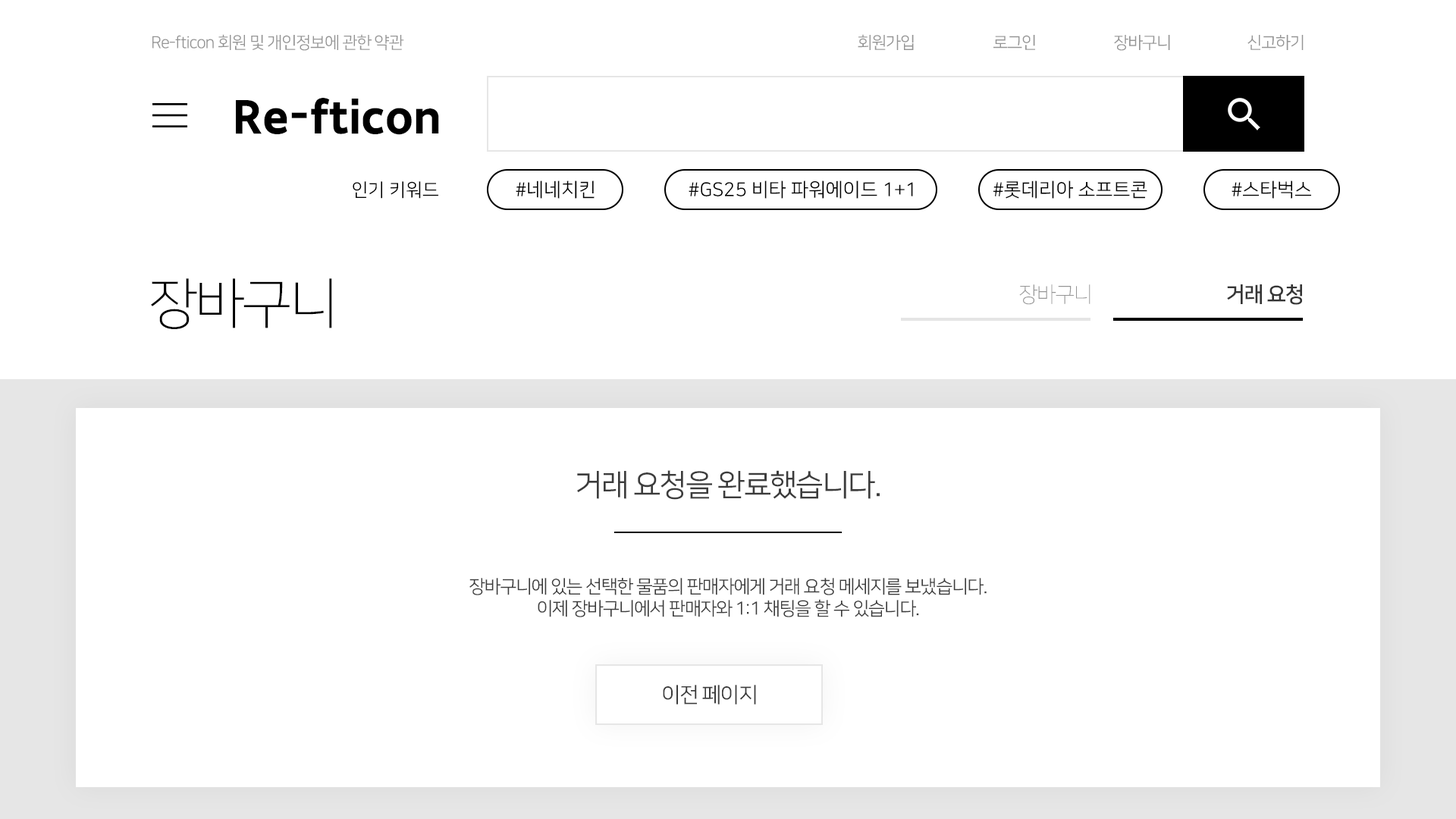
<style>
.page{position:relative;width:1456px;height:819px;background:#ffffff}
.page>*{position:absolute;margin:0}
.t1{font:16.7px "NanumSquareOTFR";letter-spacing:-0.05em;color:#959595}
.t2{font:45.5px "SDGothicNeoc-gExBd";color:#000000}
.t3{font:18.2px "NanumSquareOTFR";color:#000000}
.t4{font:19.1px "NanumSquareOTFR";color:#000000}
.t5{font:54.6px "NanumSquareOTFL";letter-spacing:-0.05em;color:#000000}
.t6{font:21.2px "NanumSquareOTFL";letter-spacing:-0.05em;color:#959595}
.t7{font:21.2px "NanumSquareOTFB";letter-spacing:-0.05em;color:#353535}
.t8{font:30.3px "NanumSquareOTFR";letter-spacing:-0.05em;color:#3c3c3c}
.t9{font:18.2px "NanumSquareOTFR";letter-spacing:-0.05em;color:#3c3c3c}
.t10{font:21.2px "NanumSquareOTFR";letter-spacing:-0.05em;color:#3c3c3c}
</style>
<div class="page">
<p class="t1" style="left:152px;top:34px;width:252px;height:17px">Re-fticon 회원 및 개인정보에 관한 약관</p>
<p class="t1" style="left:858px;top:34px;width:56px;height:16px">회원가입</p>
<p class="t1" style="left:993px;top:35px;width:42px;height:15px">로그인</p>
<p class="t1" style="left:1114px;top:35px;width:56px;height:16px">장바구니</p>
<p class="t1" style="left:1247px;top:35px;width:57px;height:15px">신고하기</p>
<p class="t2" style="left:236px;top:98px;width:203px;height:37px">Re-fticon</p>
<p class="t3" style="left:353px;top:181px;width:85px;height:18px">인기 키워드</p>
<p class="t4" style="left:516px;top:180px;width:79px;height:19px">#네네치킨</p>
<p class="t4" style="left:689px;top:180px;width:224px;height:19px">#GS25 비타 파워에이드 1+1</p>
<p class="t4" style="left:993px;top:180px;width:154px;height:19px">#롯데리아 소프트콘</p>
<p class="t4" style="left:1232px;top:180px;width:79px;height:19px">#스타벅스</p>
<p class="t5" style="left:151px;top:278px;width:181px;height:51px">장바구니</p>
<p class="t6" style="left:1019px;top:284px;width:71px;height:21px">장바구니</p>
<p class="t7" style="left:1227px;top:284px;width:75px;height:21px">거래 요청</p>
<p class="t8" style="left:577px;top:470px;width:303px;height:30px">거래 요청을 완료했습니다.</p>
<p class="t9" style="left:469px;top:578px;width:518px;height:39px;text-align:center">장바구니에 있는 선택한 물품의 판매자에게 거래 요청 메세지를 보냈습니다.<br>이제 장바구니에서 판매자와 1:1 채팅을 할 수 있습니다.</p>
<p class="t10" style="left:663px;top:685px;width:93px;height:19px">이전 페이지</p>
</div>
